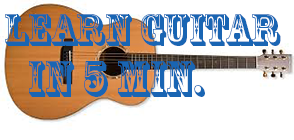
<style>
.page{position:relative;width:294px;height:140px;background:#ffffff}
.page>*{position:absolute;margin:0}
.t1{font:43.4px "RosewoodStd-Regular";color:#1965b3}
.t2{font:43.4px "MyriadPro-Regular";color:#1965b3}
.t3{font:48px "RosewoodStd-Regular";color:#1965b3}
</style>
<div class="page">
<p class="t1" style="left:5px;top:14px;width:276px;height:32px"><span class="t2">        </span> learn Guitar</p>
<p class="t3" style="left:29px;top:61px;width:176px;height:36px">in 5 min.</p>
</div>
